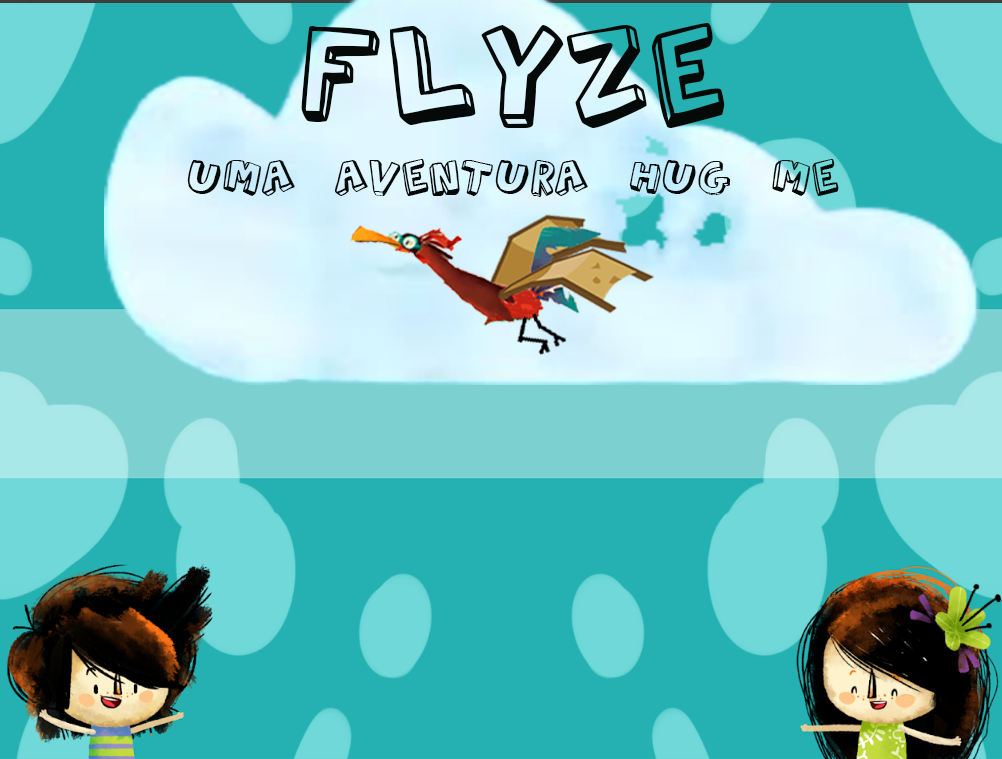
<style>
.page{position:relative;width:1002px;height:759px;background:#25b1b1}
.page>*{position:absolute;margin:0}
.t1{font:133.3px "MyriadPro-Regular";color:#050908}
.t2{font:48px "MyriadPro-Regular";color:#050908}
</style>
<div class="page">
<p class="t1" style="left:301px;top:23px;width:424px;height:105px">Flyze</p>
<p class="t2" style="left:187px;top:159px;width:652px;height:38px">Uma aventura HUG ME</p>
</div>
